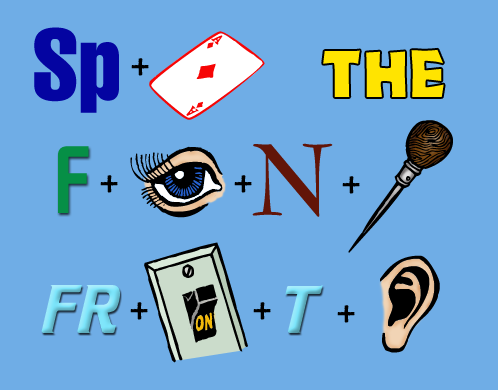
<style>
.page{position:relative;width:498px;height:390px;background:#6fade6}
.page>*{position:absolute;margin:0}
.t1{font:100px "CorporateCompressed-Regular";color:#0404a1}
.t2{font:60px "Zorba-Plain";letter-spacing:0.05em;color:#ffe400}
.t3{font:72px "RebusFont";color:#000000}
.t4{font:100px "HoratioD-Medi";color:#068f46}
.t5{font:100px "TopHat-Bold";color:#621508}
.t6{font:120px "RebusFont";color:#000000}
.t7{font:60px "Crillee";text-transform:uppercase}
</style>
<div class="page">
<p class="t1" style="left:34px;top:27px;width:85px;height:86px">Sp</p>
<p class="t2" style="left:323px;top:49px;width:121px;height:48px">THE</p>
<p class="t3" style="left:131px;top:58px;width:18px;height:18px">+</p>
<p class="t4" style="left:58px;top:146px;width:31px;height:67px">F</p>
<p class="t5" style="left:252px;top:143px;width:81px;height:74px">N</p>
<p class="t3" style="left:100px;top:175px;width:18px;height:18px">+</p>
<p class="t3" style="left:234px;top:175px;width:18px;height:18px">+</p>
<p class="t3" style="left:342px;top:176px;width:18px;height:18px">+</p>
<p class="t6" style="left:144px;top:242px;width:104px;height:121px">Ø</p>
<p class="t7" style="left:41px;top:285px;width:79px;height:48px">fr</p>
<p class="t7" style="left:285px;top:285px;width:38px;height:48px">T</p>
<p class="t3" style="left:130px;top:302px;width:18px;height:18px">+</p>
<p class="t3" style="left:253px;top:302px;width:18px;height:18px">+</p>
<p class="t3" style="left:337px;top:305px;width:18px;height:18px">+</p>
</div>
